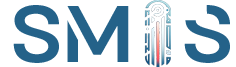
<style>
.page{position:relative;width:236px;height:67px;background:#ffffff}
.page>*{position:absolute;margin:0}
.t1{font:80.2px "Logirent-Bold";color:#246289}
</style>
<div class="page">
<p class="t1" style="left:13px;top:5px;width:217px;height:58px">Sm  s</p>
</div>
